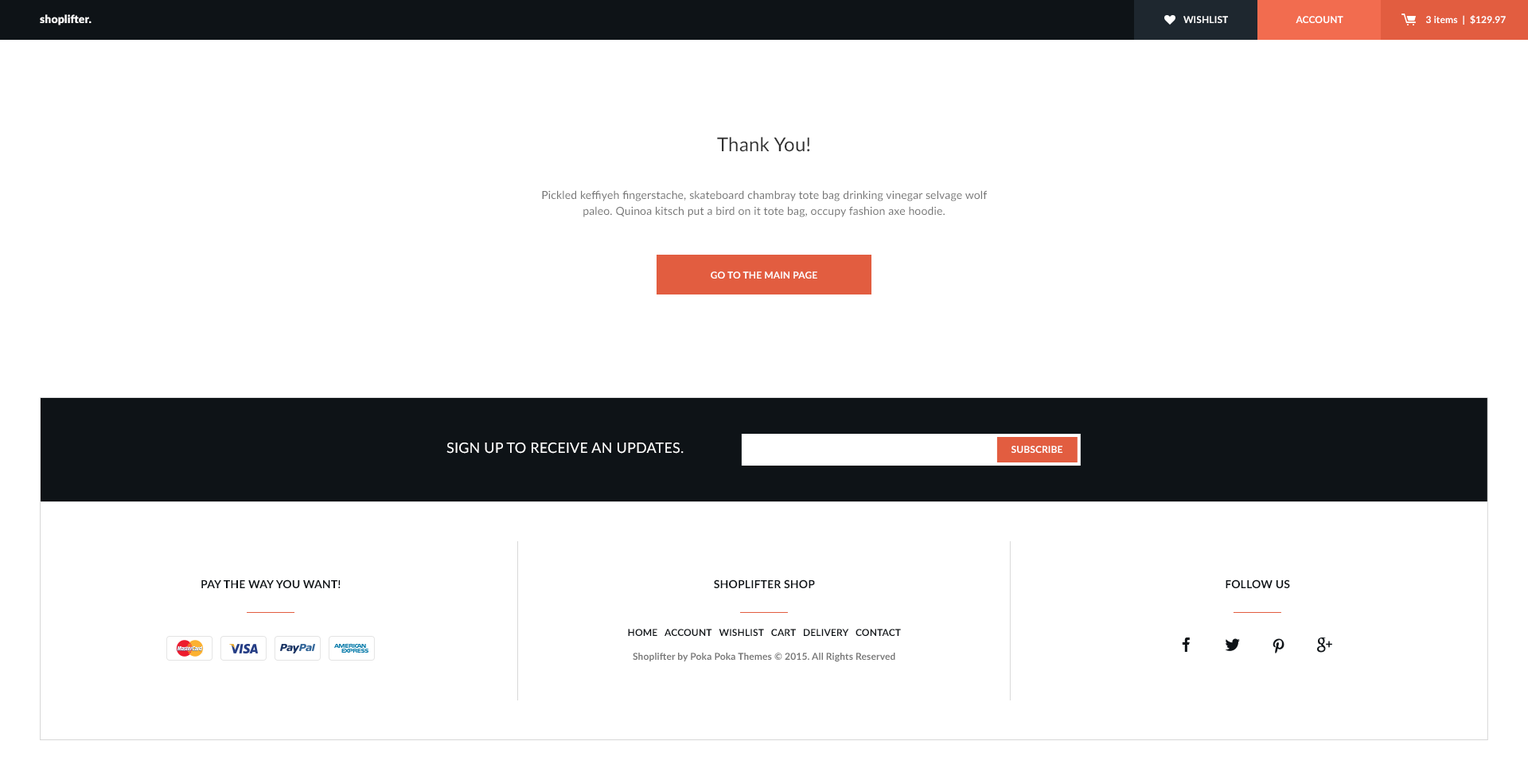
<style>
.page{position:relative;width:1528px;height:780px;background:#ffffff}
.page>*{position:absolute;margin:0}
.t1{font:11.1px "Lato-Black";letter-spacing:0.01em;color:#ffffff}
.t2{font:9.6px "Lato-Bold";letter-spacing:0.01em;color:#ffffff;text-transform:uppercase}
.t3{font:9.6px "Lato-Bold";letter-spacing:0.01em;color:#ffffff}
.t4{font:11.1px/15.9px "Lato-Regular";color:#767676}
.t5{font:19.1px/31.8px "Lato-Regular";letter-spacing:0.01em;color:#313131}
.t6{font:14.3px "Lato-Regular";letter-spacing:0.01em;color:#ffffff;text-transform:uppercase}
.t7{font:11.1px "Lato-Bold";letter-spacing:0.01em;color:#0e1317;text-transform:uppercase}
.t8{font:9.6px/23.8px "Lato-Bold";letter-spacing:0.01em;color:#767676}
.t9{font:11.1px/23.8px "Lato-Bold";letter-spacing:0.01em;color:#0e1317;text-transform:uppercase}
.t10{font:9.6px/23.8px "Lato-Bold";letter-spacing:0.01em;color:#0e1317;text-transform:uppercase}
</style>
<div class="page">
<p class="t1" style="left:40px;top:14px;width:52px;height:11px">shoplifter.</p>
<p class="t2" style="left:1184px;top:16px;width:44px;height:7px">wishlist</p>
<p class="t2" style="left:1296px;top:16px;width:48px;height:7px">Account</p>
<p class="t3" style="left:1427px;top:15px;width:79px;height:10px">3 items  |  $129.97</p>
<p class="t4" style="left:542px;top:137px;width:445px;height:80px;text-align:center"><span class="t5">Thank You!<br><br></span>Pickled keffiyeh fingerstache, skateboard chambray tote bag drinking vinegar selvage wolf paleo. Quinoa kitsch put a bird on it tote bag, occupy fashion axe hoodie.</p>
<p class="t2" style="left:711px;top:271px;width:107px;height:8px">Go to the main page</p>
<p class="t6" style="left:447px;top:443px;width:237px;height:11px">Sign up to receive an updates.</p>
<p class="t2" style="left:1011px;top:446px;width:52px;height:7px">subscribe</p>
<p class="t7" style="left:201px;top:580px;width:140px;height:8px">Pay the way you want!</p>
<p class="t8" style="left:628px;top:580px;width:273px;height:82px;text-align:center"><span class="t9">Shoplifter shop<br><br></span><span class="t10">home   account   wishlist   cart   delivery   contact<br></span>Shoplifter by Poka Poka Themes © 2015. All Rights Reserved</p>
<p class="t7" style="left:1226px;top:580px;width:64px;height:8px">Follow us</p>
</div>
